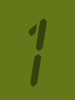
<style>
.page{position:relative;width:75px;height:100px;background:#637819}
.page>*{position:absolute;margin:0}
.t1{font:86px "LCD2Normal";color:#36410e;scale:1.12 1}
</style>
<div class="page">
<p class="t1" style="left:28px;top:18px;width:19px;height:69px">1</p>
</div>
